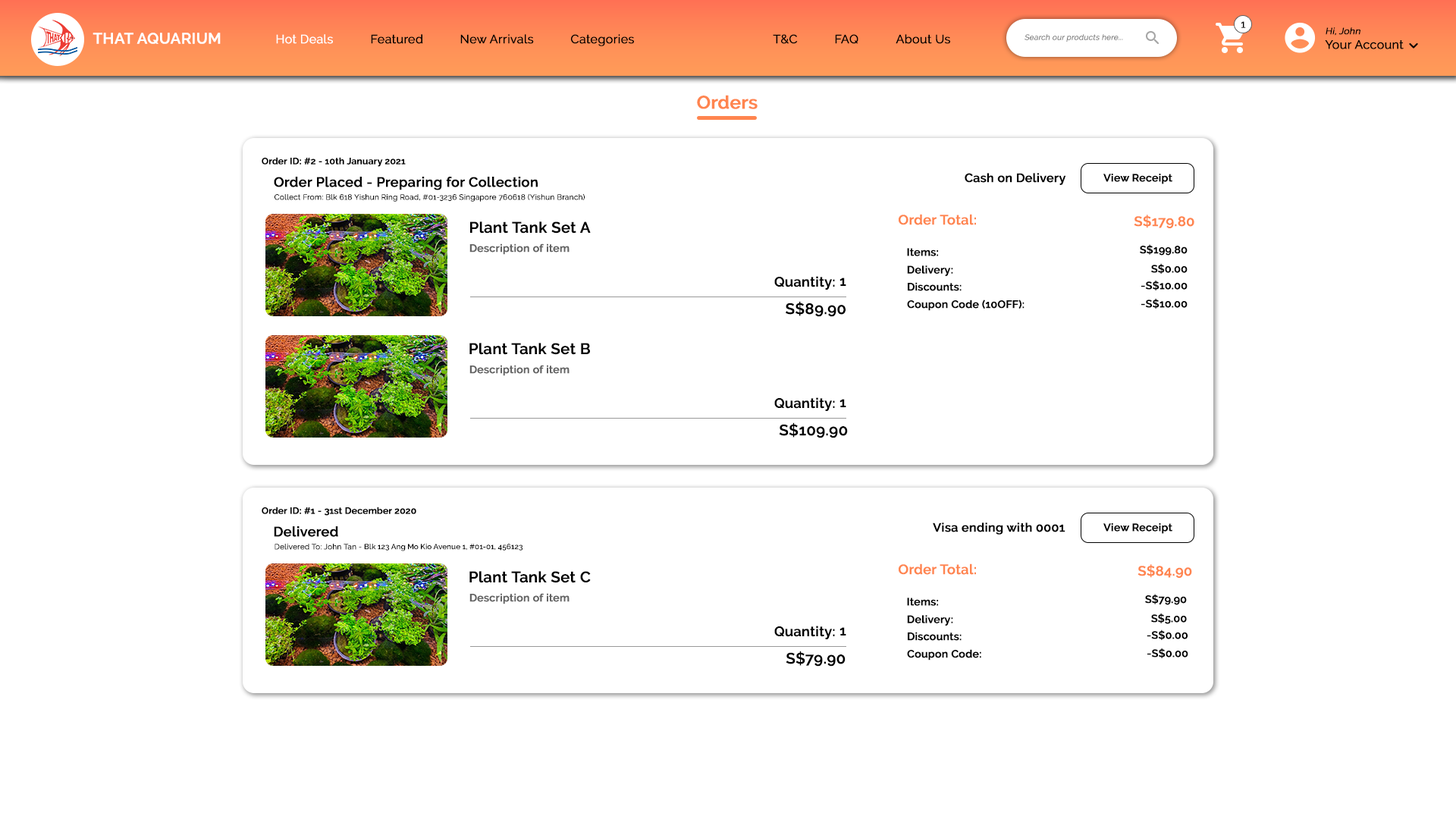
<style>
.page{position:relative;width:1456px;height:819px;background:#ffffff}
.page>*{position:absolute;margin:0}
.t1{font:10.6px "Raleway-Regular";color:#000000;font-weight:bold}
.t2{font:12.1px "Raleway-Regular";color:#000000;font-weight:bold}
.t3{font:9.1px "Raleway-Regular";color:#000000;font-weight:bold;font-style:italic}
.t4{font:15.2px "Raleway-SemiBold";color:#ffffff;font-weight:bold}
.t5{font:12.1px "Raleway-Regular";color:#ffffff;font-weight:bold}
.t6{font:7.6px "Raleway-Regular";color:#787878;font-weight:bold;font-style:italic}
.t7{font:18.2px "Raleway-SemiBold";color:#ff854f;font-weight:bold}
.t8{font:9.1px "Raleway-SemiBold";color:#000000;font-weight:bold}
.t9{font:12.1px "Raleway-SemiBold";color:#000000;font-weight:bold}
.t10{font:10.6px "Raleway-SemiBold";color:#000000;font-weight:bold}
.t11{font:13.6px "Raleway-SemiBold";color:#000000;font-weight:bold}
.t12{font:7.6px "Raleway-Regular";color:#000000;font-weight:bold}
.t13{font:15.2px "Raleway-SemiBold";color:#000000;font-weight:bold}
.t14{font:13.6px "Raleway-SemiBold";color:#ff854f;font-weight:bold}
.t15{font:10.6px "Raleway-SemiBold";color:#646464;font-weight:bold}
.t16{font:7.6px "Raleway-SemiBold";color:#000000}
</style>
<div class="page">
<p class="t1" style="left:1241px;top:21px;width:5px;height:7px">1</p>
<p class="t2" style="left:1325px;top:27px;width:79px;height:22px"><span class="t3">Hi, John<br></span>Your Account</p>
<p class="t4" style="left:93px;top:33px;width:128px;height:11px">THAT AQUARIUM</p>
<p class="t5" style="left:276px;top:34px;width:57px;height:10px">Hot Deals</p>
<p class="t2" style="left:371px;top:34px;width:52px;height:10px">Featured</p>
<p class="t2" style="left:460px;top:34px;width:74px;height:10px">New Arrivals</p>
<p class="t2" style="left:571px;top:34px;width:63px;height:12px">Categories</p>
<p class="t2" style="left:773px;top:34px;width:25px;height:10px">T&amp;C</p>
<p class="t2" style="left:835px;top:34px;width:23px;height:10px">FAQ</p>
<p class="t2" style="left:896px;top:34px;width:54px;height:10px">About Us</p>
<p class="t6" style="left:1024px;top:34px;width:99px;height:8px">Search our products here...</p>
<p class="t7" style="left:697px;top:95px;width:61px;height:14px">Orders</p>
<p class="t8" style="left:262px;top:157px;width:144px;height:10px">Order ID: #2 - 10th January 2021</p>
<p class="t9" style="left:965px;top:173px;width:101px;height:12px">Cash on Delivery</p>
<p class="t10" style="left:1103px;top:174px;width:69px;height:10px">View Receipt</p>
<p class="t11" style="left:274px;top:177px;width:264px;height:13px">Order Placed - Preparing for Collection</p>
<p class="t12" style="left:275px;top:193px;width:310px;height:9px">Collect From: Blk 618 Yishun Ring Road, #01-3236 Singapore 760618 (Yishun Branch)</p>
<p class="t13" style="left:470px;top:221px;width:121px;height:13px">Plant Tank Set A</p>
<p class="t14" style="left:899px;top:214px;width:77px;height:11px">Order Total:</p>
<p class="t14" style="left:1134px;top:215px;width:60px;height:13px">S$179.80</p>
<p class="t15" style="left:469px;top:243px;width:101px;height:12px">Description of item</p>
<p class="t10" style="left:1140px;top:244px;width:48px;height:12px">S$199.80</p>
<p class="t10" style="left:907px;top:248px;width:31px;height:8px">Items:</p>
<p class="t10" style="left:907px;top:265px;width:46px;height:11px">Delivery:</p>
<p class="t10" style="left:1151px;top:263px;width:37px;height:11px">S$0.00</p>
<p class="t11" style="left:774px;top:276px;width:61px;height:14px">Quantity:</p>
<p class="t11" style="left:839px;top:278px;width:7px;height:8px">1</p>
<p class="t10" style="left:1141px;top:280px;width:47px;height:10px">-S$10.00</p>
<p class="t10" style="left:908px;top:282px;width:54px;height:9px">Discounts:</p>
<p class="t13" style="left:786px;top:301px;width:60px;height:16px">S$89.90</p>
<p class="t10" style="left:907px;top:300px;width:117px;height:11px">Coupon Code (10OFF):</p>
<p class="t10" style="left:1141px;top:298px;width:47px;height:11px">-S$10.00</p>
<p class="t13" style="left:469px;top:343px;width:121px;height:12px">Plant Tank Set B</p>
<p class="t15" style="left:469px;top:365px;width:101px;height:11px">Description of item</p>
<p class="t11" style="left:774px;top:397px;width:61px;height:14px">Quantity:</p>
<p class="t11" style="left:839px;top:399px;width:7px;height:8px">1</p>
<p class="t13" style="left:779px;top:422px;width:69px;height:16px">S$109.90</p>
<p class="t8" style="left:262px;top:507px;width:154px;height:9px">Order ID: #1 - 31st December 2020</p>
<p class="t11" style="left:274px;top:526px;width:64px;height:11px">Delivered</p>
<p class="t9" style="left:933px;top:522px;width:132px;height:13px">Visa ending with 0001</p>
<p class="t10" style="left:1103px;top:523px;width:69px;height:11px">View Receipt</p>
<p class="t16" style="left:275px;top:544px;width:247px;height:7px"><span class="t12">Delivered To: John Tan - </span>Blk 123 Ang Mo Kio Avenue 1, #01-01, 456123</p>
<p class="t14" style="left:899px;top:563px;width:77px;height:12px">Order Total:</p>
<p class="t14" style="left:1137px;top:564px;width:55px;height:14px">S$84.90</p>
<p class="t13" style="left:469px;top:571px;width:122px;height:12px">Plant Tank Set C</p>
<p class="t15" style="left:469px;top:593px;width:101px;height:11px">Description of item</p>
<p class="t10" style="left:1145px;top:594px;width:42px;height:11px">S$79.90</p>
<p class="t10" style="left:907px;top:598px;width:31px;height:8px">Items:</p>
<p class="t10" style="left:907px;top:615px;width:46px;height:11px">Delivery:</p>
<p class="t10" style="left:1151px;top:613px;width:36px;height:11px">S$5.00</p>
<p class="t11" style="left:774px;top:626px;width:61px;height:13px">Quantity:</p>
<p class="t11" style="left:839px;top:627px;width:7px;height:8px">1</p>
<p class="t10" style="left:1147px;top:629px;width:41px;height:11px">-S$0.00</p>
<p class="t10" style="left:908px;top:632px;width:54px;height:9px">Discounts:</p>
<p class="t13" style="left:786px;top:651px;width:60px;height:16px">S$79.90</p>
<p class="t10" style="left:907px;top:649px;width:74px;height:11px">Coupon Code:</p>
<p class="t10" style="left:1147px;top:648px;width:41px;height:10px">-S$0.00</p>
</div>
